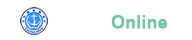
<style>
.page{position:relative;width:192px;height:40px;background:#ffffff}
.page>*{position:absolute;margin:0}
.t1{font:18px "DengXian-Bold";color:#6dc5a3;font-weight:bold}
</style>
<div class="page">
<p class="t1" style="left:111px;top:15px;width:56px;height:14px">Online</p>
</div>
